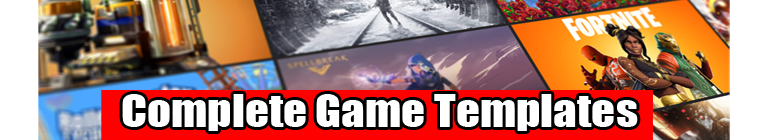
<style>
.page{position:relative;width:770px;height:140px}
.page>*{position:absolute;margin:0}
.t1{font:41.8px "Impact";color:#ffffff;scale:1.13 1}
</style>
<div class="page">
<p class="t1" style="left:122px;top:94px;width:516px;height:37px">Complete Game Templates</p>
</div>
